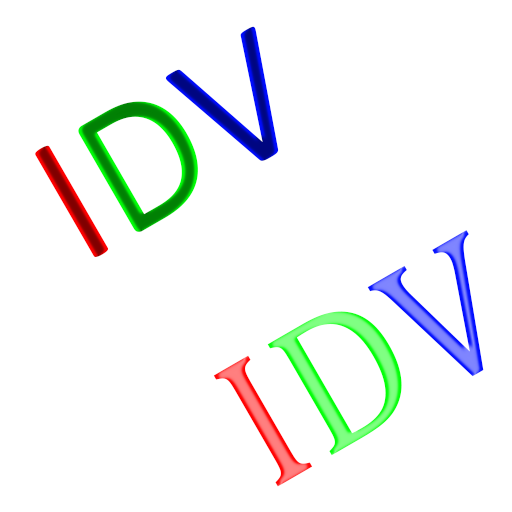
<style>
.page{position:relative;width:512px;height:512px;background:#ffffff}
.page>*{position:absolute;margin:0}
.t1{font:192px "Calibri"}
.t2{font:192px "Cambria"}
</style>
<div class="page">
<p class="t1" style="left:35px;top:26px;width:244px;height:231px;rotate:-30deg">IDV</p>
<p class="t2" style="left:213px;top:230px;width:271px;height:257px;rotate:-30deg">IDV</p>
</div>
